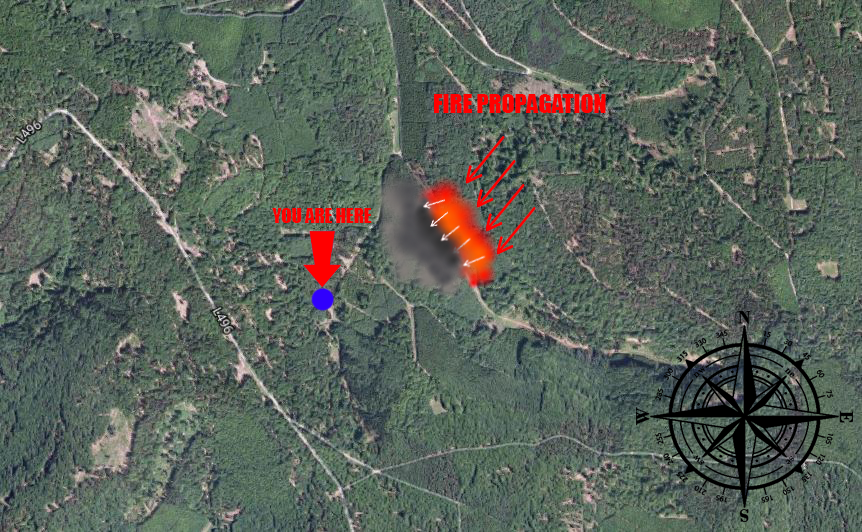
<style>
.page{position:relative;width:862px;height:532px}
.page>*{position:absolute;margin:0}
.t1{font:24px "Impact";color:#ff0000}
.t2{font:18.7px "Impact";color:#ff0000}
</style>
<div class="page">
<p class="t1" style="left:434px;top:94px;width:172px;height:19px">FIRE PROPAGATION</p>
<p class="t2" style="left:272px;top:208px;width:100px;height:15px">YOU ARE HERE</p>
</div>
